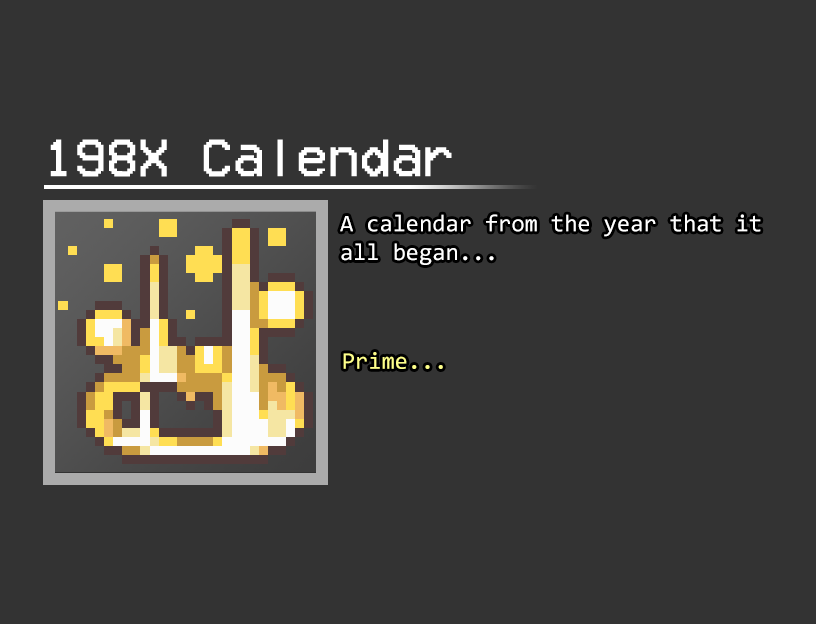
<style>
.page{position:relative;width:816px;height:624px;background:#333333}
.page>*{position:absolute;margin:0}
.t1{font:54px "VCROSDMono";color:#ffffff}
.t2{font:24px "Consolas";color:#ffffff}
.t3{font:24px "Consolas";color:#feff8b}
</style>
<div class="page">
<p class="t1" style="left:50px;top:139px;width:402px;height:38px">198X Calendar</p>
<p class="t2" style="left:340px;top:214px;width:421px;height:51px">A calendar from the year that it <br>all began...</p>
<p class="t3" style="left:343px;top:352px;width:100px;height:17px">Prime...</p>
</div>
